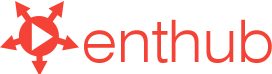
<style>
.page{position:relative;width:272px;height:74px;background:#ffffff}
.page>*{position:absolute;margin:0}
.t1{font:58.6px "Swiss721BT-LightExtended";color:#f44336;scale:0.93 1}
</style>
<div class="page">
<p class="t1" style="left:84px;top:19px;width:188px;height:44px">enthub</p>
</div>
